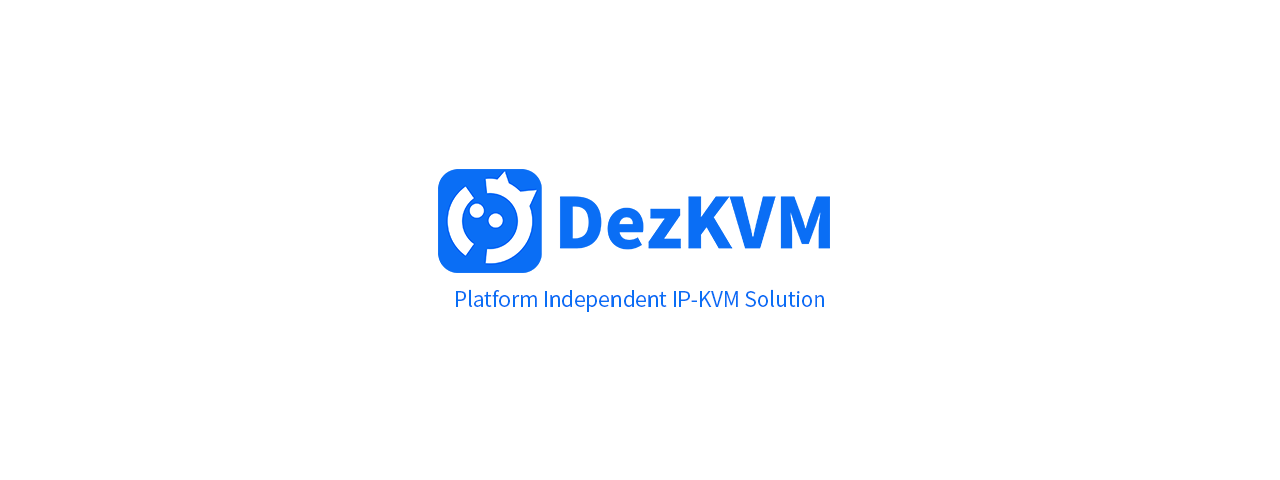
<style>
.page{position:relative;width:1280px;height:480px;background:#ffffff}
.page>*{position:absolute;margin:0}
.t1{font:20.8px "NotoSansCJKhk-DemiLight";color:#0a6ef5}
</style>
<div class="page">
<p class="t1" style="left:456px;top:289px;width:368px;height:23px">Platform Independent IP-KVM Solution</p>
</div>
